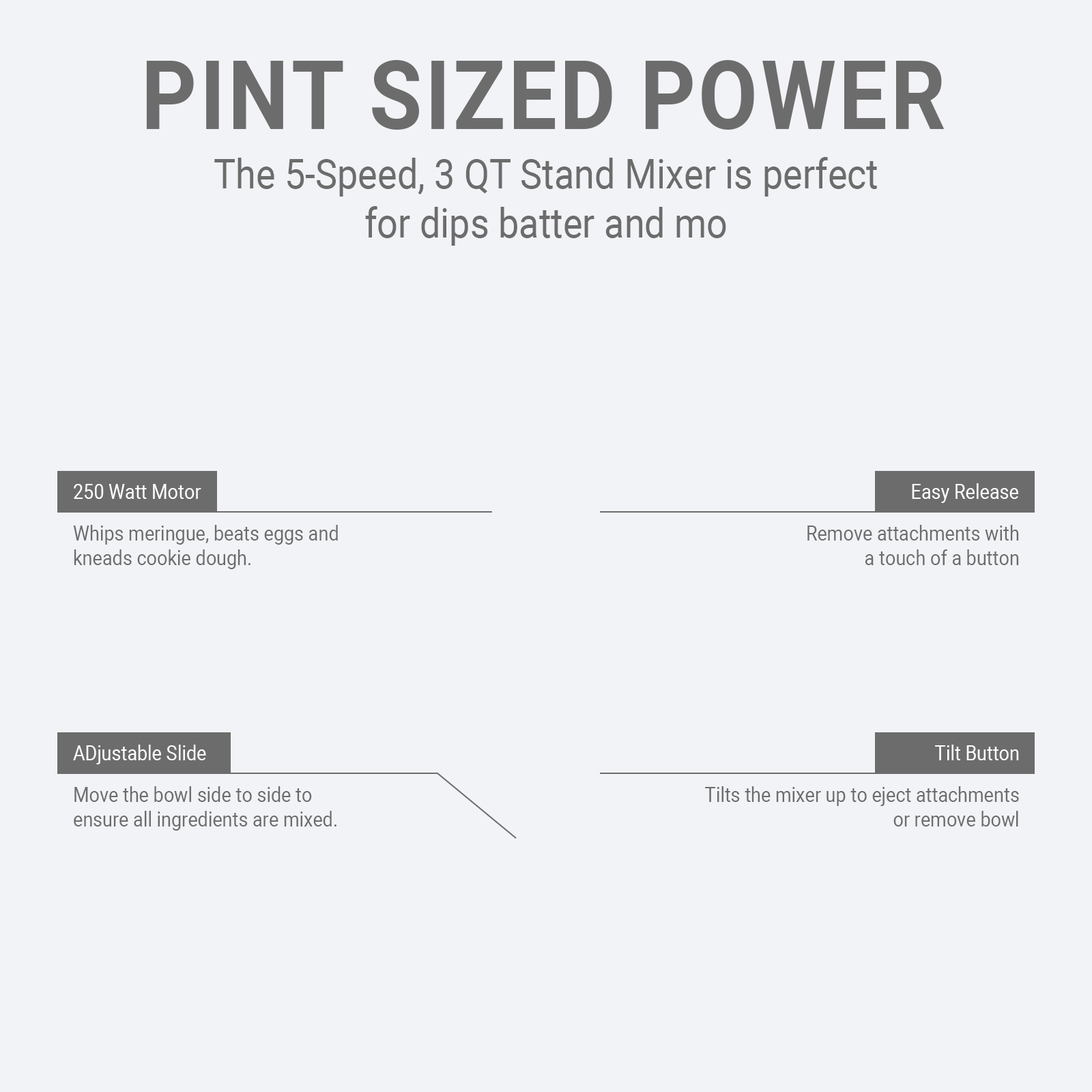
<style>
.page{position:relative;width:1092px;height:1092px;background:#f2f3f6}
.page>*{position:absolute;margin:0}
.t1{font:95.5px "Roboto-Bold";color:#6c6c6c;text-transform:uppercase;scale:0.9 1}
.t2{font:40.9px "Roboto-Regular";color:#6c6c6c;scale:0.9 1}
.t3{font:20.5px "Roboto-Regular";color:#ffffff;scale:0.9 1}
.t4{font:20.5px "Roboto-Regular";color:#6c6c6c;scale:0.9 1}
</style>
<div class="page">
<p class="t1" style="left:146px;top:60px;width:798px;height:70px">Pint sized power</p>
<p class="t2" style="left:214px;top:157px;width:663px;height:89px;text-align:center">The 5-Speed, 3 QT Stand Mixer is perfect<br>for dips batter and mo</p>
<p class="t3" style="left:74px;top:484px;width:127px;height:15px">250 Watt Motor</p>
<p class="t3" style="left:912px;top:483px;width:106px;height:20px">Easy Release</p>
<p class="t4" style="left:73px;top:525px;width:265px;height:44px">Whips meringue, beats eggs and<br>kneads cookie dough.</p>
<p class="t4" style="left:807px;top:525px;width:212px;height:40px;text-align:right">Remove attachments with<br>a touch of a button</p>
<p class="t3" style="left:73px;top:745px;width:133px;height:19px">ADjustable Slide</p>
<p class="t3" style="left:935px;top:745px;width:84px;height:15px">Tilt Button</p>
<p class="t4" style="left:74px;top:786px;width:262px;height:45px">Move the bowl side to side to<br>ensure all ingredients are mixed.</p>
<p class="t4" style="left:705px;top:786px;width:314px;height:40px;text-align:right">Tilts the mixer up to eject attachments<br>or remove bowl</p>
</div>
